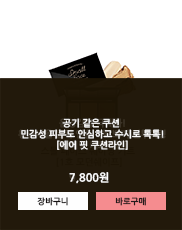
<style>
.page{position:relative;width:182px;height:230px;background:#22190b}
.page>*{position:absolute;margin:0}
.t1{font:9.2px "NanumGothicBold"}
.t2{font:9.2px "NanumGothicBold";color:#fbfbfb}
.t3{font:11px "NanumGothicBold";color:#ffffff}
.t4{font:8.3px "NanumGothicBold";color:#171212}
.t5{font:8.3px "NanumGothicBold";color:#231b1b}
</style>
<div class="page">
<p class="t1" style="left:18px;top:118px;width:148px;height:32px;text-align:center">음영감을 극대화!<br>황금비율 윤곽 연출 1초 쁘띠 컨투어링<br>[쉐이딩 키트라인]</p>
<p class="t2" style="left:21px;top:118px;width:143px;height:32px;text-align:center">공기 같은 쿠션 <br>민감성 피부도 안심하고 수시로 톡톡!<br>[에어 핏 쿠션라인]</p>
<p class="t3" style="left:69px;top:172px;width:40px;height:12px">5,800원</p>
<p class="t3" style="left:69px;top:172px;width:40px;height:12px">5,800원</p>
<p class="t3" style="left:69px;top:172px;width:40px;height:12px">7,500원</p>
<p class="t3" style="left:69px;top:172px;width:40px;height:12px">7,500원</p>
<p class="t3" style="left:69px;top:172px;width:40px;height:12px">9,000원</p>
<p class="t3" style="left:69px;top:172px;width:40px;height:12px">9,000원</p>
<p class="t3" style="left:69px;top:172px;width:40px;height:12px">7,800원</p>
<p class="t4" style="left:37px;top:197px;width:31px;height:9px">장바구니</p>
<p class="t4" style="left:37px;top:197px;width:31px;height:9px">장바구니</p>
<p class="t4" style="left:37px;top:197px;width:31px;height:9px">장바구니</p>
<p class="t5" style="left:115px;top:197px;width:31px;height:9px">바로구매</p>
<p class="t5" style="left:115px;top:197px;width:31px;height:9px">바로구매</p>
<p class="t5" style="left:115px;top:197px;width:31px;height:9px">바로구매</p>
</div>
